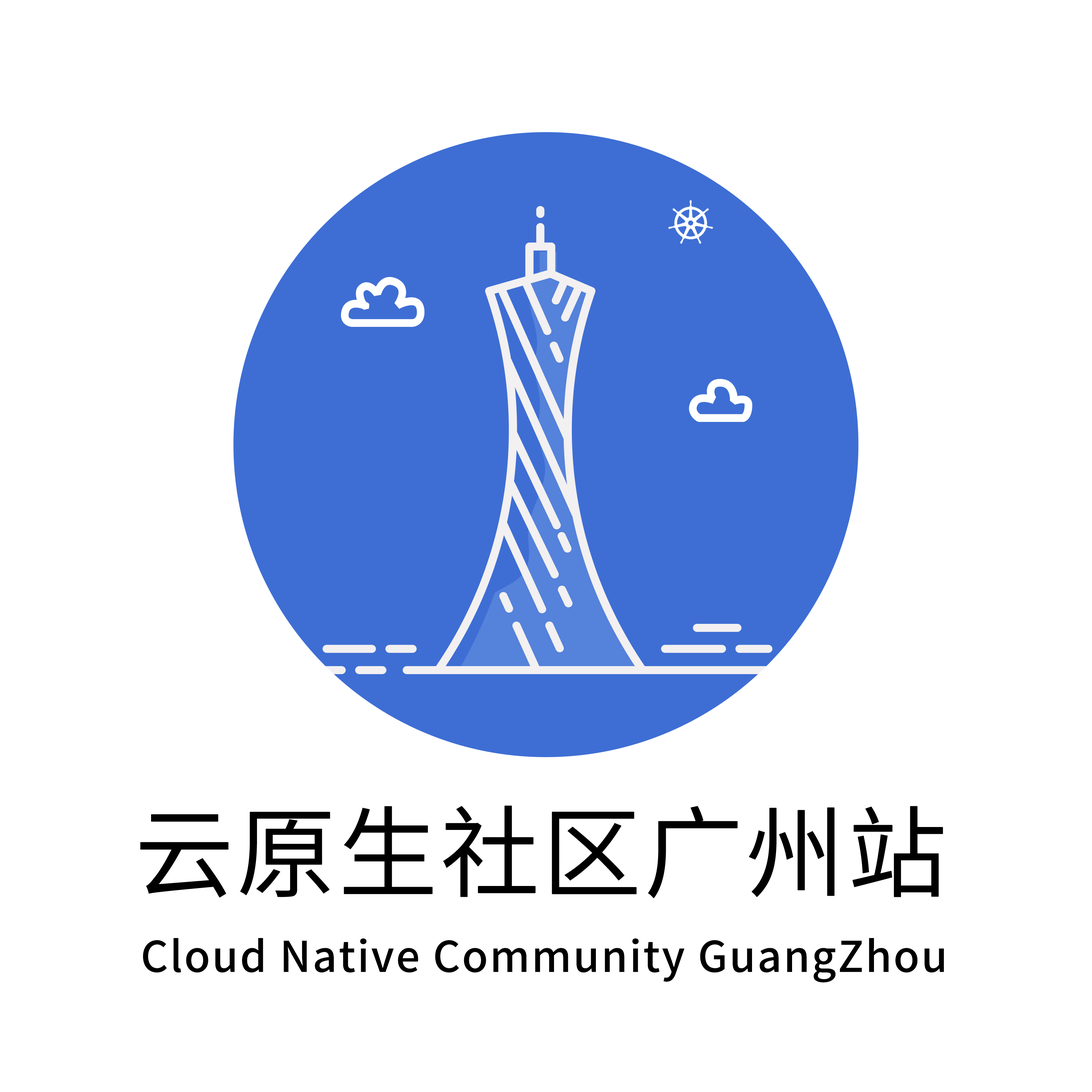
<style>
.page{position:relative;width:1092px;height:1092px;background:#ffffff}
.page>*{position:absolute;margin:0}
.t1{font:99.2px "SourceHanSansCN-Normal";color:#000000;text-transform:uppercase;font-weight:bold}
.t2{font:42.5px "SourceHanSansSC-Medium";letter-spacing:0.04em;color:#000000}
</style>
<div class="page">
<p class="t1" style="left:140px;top:806px;width:803px;height:92px">云原生社区广州站</p>
<p class="t2" style="left:143px;top:938px;width:801px;height:44px">Cloud Native Community GuangZhou</p>
</div>
